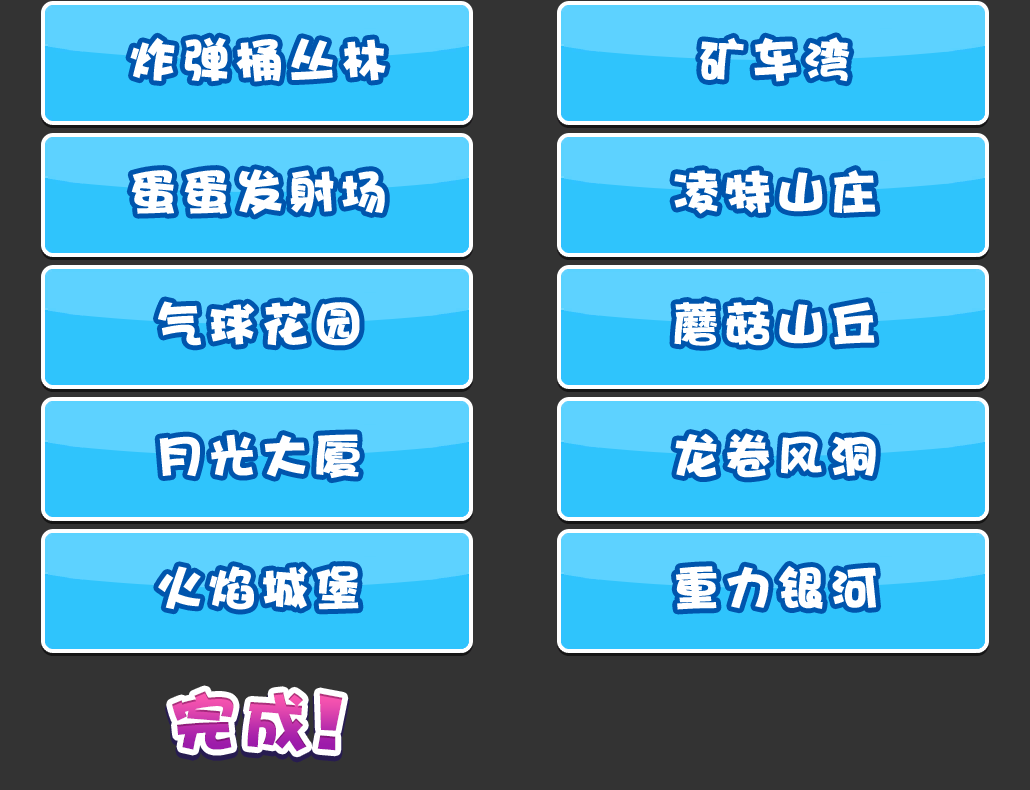
<style>
.page{position:relative;width:1030px;height:790px;background:#333333}
.page>*{position:absolute;margin:0}
.t1{font:48px "DFPHaiBaoW12";letter-spacing:0.1em;color:#ffffff}
.t2{font:66.7px "DFPHaiBaoW12";letter-spacing:0.1em}
.t3{font:66.7px "MARIOFontv3_1-Solid";letter-spacing:0.1em}
</style>
<div class="page">
<p class="t1" style="left:130px;top:37px;width:256px;height:45px">炸弹桶丛林</p>
<p class="t1" style="left:700px;top:37px;width:150px;height:45px">矿车湾</p>
<p class="t1" style="left:131px;top:169px;width:254px;height:46px">蛋蛋发射场</p>
<p class="t1" style="left:674px;top:170px;width:202px;height:44px">凌特山庄</p>
<p class="t1" style="left:158px;top:301px;width:202px;height:45px">气球花园</p>
<p class="t1" style="left:674px;top:301px;width:201px;height:45px">蘑菇山丘</p>
<p class="t1" style="left:159px;top:434px;width:201px;height:45px">月光大厦</p>
<p class="t1" style="left:675px;top:433px;width:201px;height:45px">龙卷风洞</p>
<p class="t1" style="left:158px;top:566px;width:201px;height:44px">火焰城堡</p>
<p class="t1" style="left:676px;top:565px;width:200px;height:45px">重力银河</p>
<p class="t2" style="left:172px;top:691px;width:171px;height:61px">完成<span class="t3">！</span></p>
</div>
